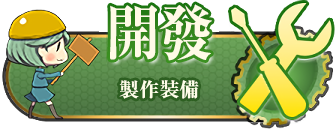
<style>
.page{position:relative;width:336px;height:135px;background:#ffffff}
.page>*{position:absolute;margin:0}
.t1{font:60px "RyuminPr6N-ExBold";letter-spacing:-0.05em;color:#fffae7;scale:0.92 1}
.t2{font:20px "RyuminPr6N-ExBold";color:#fffee9}
</style>
<div class="page">
<p class="t1" style="left:110px;top:4px;width:102px;height:57px">開發</p>
<p class="t2" style="left:119px;top:80px;width:80px;height:19px">製作裝備</p>
</div>
